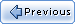
<style>
.page{position:relative;width:75px;height:24px}
.page>*{position:absolute;margin:0}
.t1{font:10px "Tahoma";letter-spacing:0.1em;color:#000000}
</style>
<div class="page">
<p class="t1" style="left:25px;top:8px;width:45px;height:7px">Previous</p>
</div>
